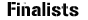
<style>
.page{position:relative;width:88px;height:20px;background:#ffffff}
.page>*{position:absolute;margin:0}
.t1{font:20px "Gunplay";color:#040404}
</style>
<div class="page">
<p class="t1" style="left:7px;top:2px;width:72px;height:15px">Finalists</p>
</div>
